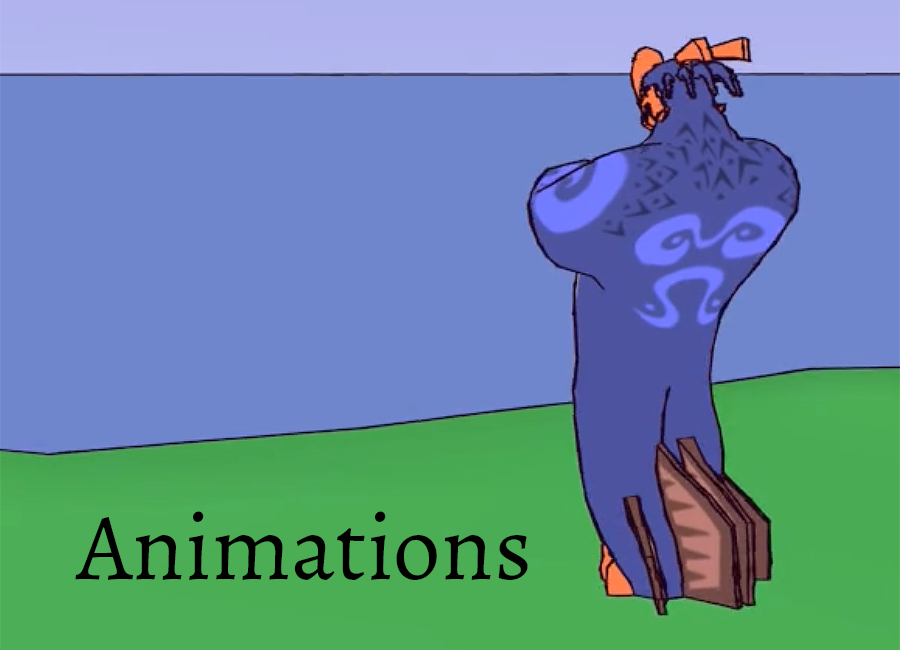
<style>
.page{position:relative;width:900px;height:650px;background:#6f86cc}
.page>*{position:absolute;margin:0}
.t1{font:95px "Alegreya-Regular";color:#000000}
</style>
<div class="page">
<p class="t1" style="left:75px;top:511px;width:453px;height:69px">Animations</p>
</div>
